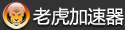
<style>
.page{position:relative;width:125px;height:30px;background:#333333}
.page>*{position:absolute;margin:0}
.t1{font:18px "MicrosoftYaHei";color:#ffffff}
</style>
<div class="page">
<p class="t1" style="left:33px;top:7px;width:91px;height:19px">老虎加速器</p>
</div>
